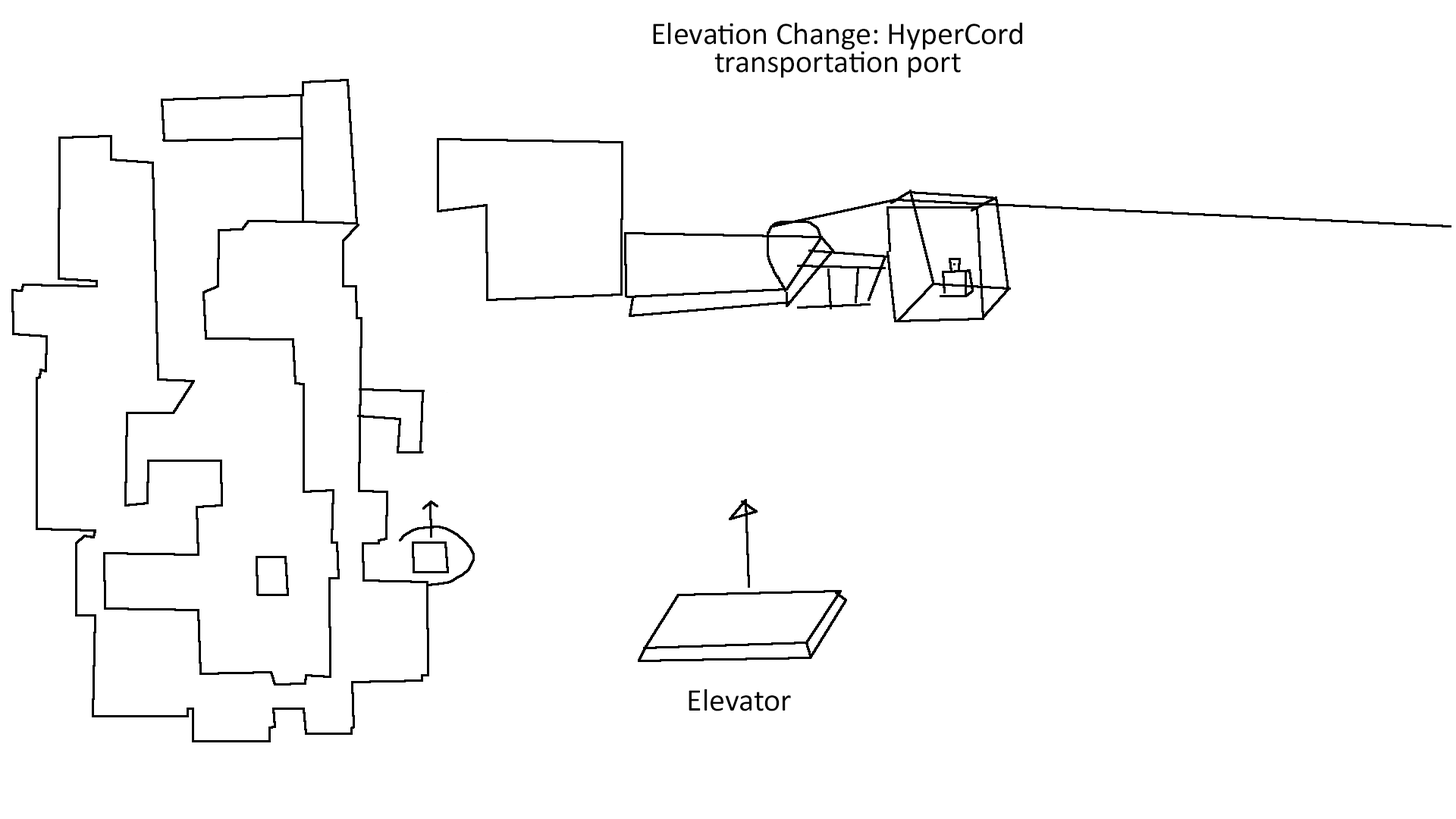
<style>
.page{position:relative;width:1456px;height:819px;background:#ffffff}
.page>*{position:absolute;margin:0}
.t1{font:31.6px/28.4px "Calibri";color:#000000}
.t2{font:31.6px "Calibri";color:#000000}
</style>
<div class="page">
<p class="t1" style="left:653px;top:22px;width:369px;height:56px;text-align:center">Elevation Change: HyperCord transportation port</p>
<p class="t2" style="left:689px;top:689px;width:102px;height:22px">Elevator</p>
</div>
